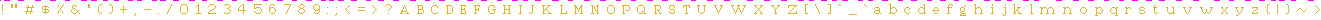
<style>
.page{position:relative;width:1321px;height:20px;background:#ffffff}
.page>*{position:absolute;margin:0}
.t1{font:12px "Talk-to-three-headed-monkey";color:#dcb42f}
</style>
<div class="page">
<p class="t1" style="left:2px;top:4px;width:1318px;height:12px">! “ # $ % &amp; ‘ ( ) + , - . / 0 1 2 3 4 5 6 7 8 9 : ; &lt; = &gt; ? A B C D E F G H I J K L M N O P Q R S T U V W X Y Z [ \ ] ^ _ ` a b c d e f g h i j k l m n o p q r s t u v w x y z { | } ~ &gt;</p>
</div>
